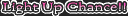
<style>
.page{position:relative;width:128px;height:16px;background:#2c2c2c}
.page>*{position:absolute;margin:0}
.t1{font:11.7px "StempelSchneidlerStd-Roman";scale:1.33 1}
.t2{font:11.2px "StempelSchneidlerStd-Roman";scale:1.39 1}
</style>
<div class="page">
<p class="t1" style="left:3px;top:2px;width:123px;height:12px">Light Up Chance!!</p>
<p class="t2" style="left:3px;top:2px;width:123px;height:12px">Light Up Chance!!</p>
</div>
